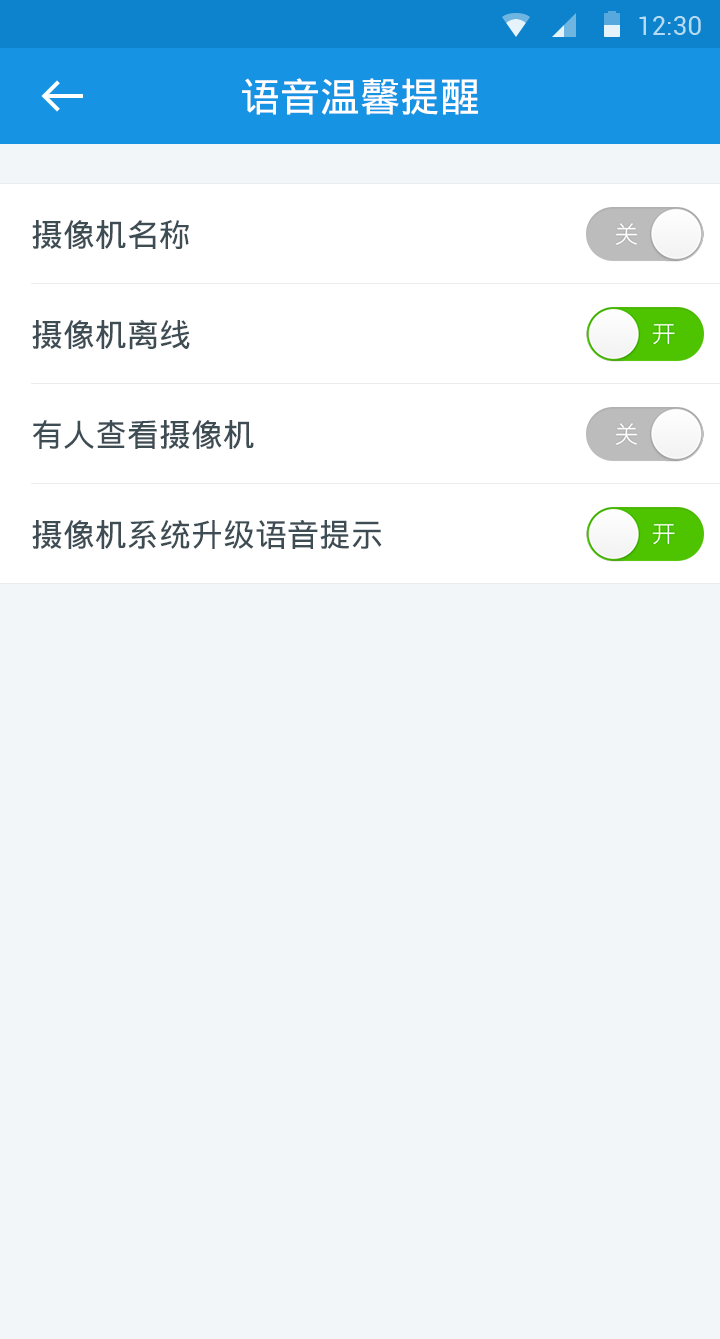
<style>
.page{position:relative;width:720px;height:1339px;background:#f2f6f8}
.page>*{position:absolute;margin:0}
.t1{font:40px "DroidSansFallback";color:#ffffff}
.t2{font:32px "DroidSansFallback";color:#3e4c54}
</style>
<div class="page">
<p class="t1" style="left:242px;top:78px;width:236px;height:37px">语音温馨提醒</p>
<p class="t2" style="left:32px;top:220px;width:157px;height:29px">摄像机名称</p>
<p class="t2" style="left:32px;top:319px;width:158px;height:31px">摄像机离线</p>
<p class="t2" style="left:33px;top:420px;width:221px;height:29px">有人查看摄像机</p>
<p class="t2" style="left:32px;top:520px;width:350px;height:29px">摄像机系统升级语音提示</p>
</div>
